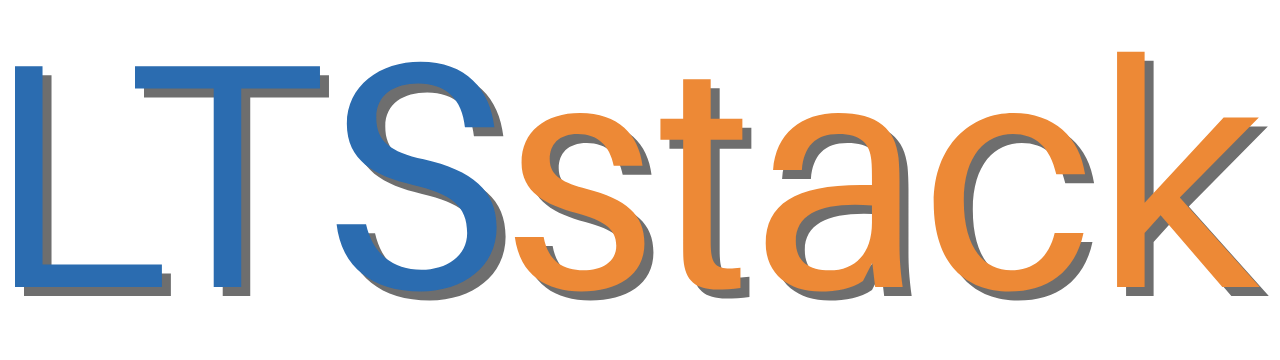
<style>
.page{position:relative;width:1280px;height:360px;background:#ffffff}
.page>*{position:absolute;margin:0}
.t1{font:320px "Aileron-Regular";color:#ed8936}
.t2{font:320px "Aileron-Regular";color:#2b6cb0}
</style>
<div class="page">
<p class="t1" style="left:15px;top:51px;width:1245px;height:241px"><span class="t2">LTS</span>stack</p>
</div>
